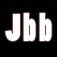
<style>
.page{position:relative;width:57px;height:57px;background:#ffffff}
.page>*{position:absolute;margin:0}
.t1{font:36px "PoplarStd";letter-spacing:0.075em;color:#ffffff}
</style>
<div class="page">
<p class="t1" style="left:5px;top:13px;width:47px;height:28px">Jbb</p>
</div>
